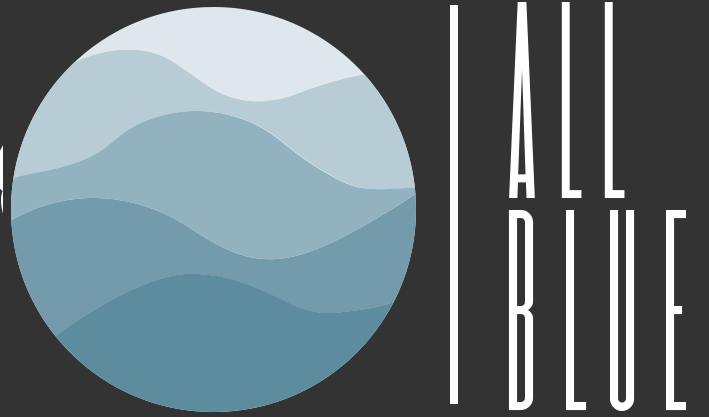
<style>
.page{position:relative;width:709px;height:417px;background:#333333}
.page>*{position:absolute;margin:0}
.t1{font:235.4px "TallerEvolutionRev";color:#ffffff}
.t2{font:240px "TallerEvolutionRev";color:#ffffff}
</style>
<div class="page">
<p class="t1" style="left:509px;top:2px;width:116px;height:196px">A L L</p>
<p class="t2" style="left:508px;top:210px;width:178px;height:201px">B L U E</p>
</div>
